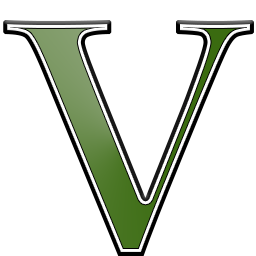
<style>
.page{position:relative;width:256px;height:256px;background:#ffffff}
.page>*{position:absolute;margin:0}
.t1{font:340px "PalatinoLinotype-Bold"}
</style>
<div class="page">
<p class="t1" style="left:3px;top:20px;width:251px;height:236px">V</p>
</div>
